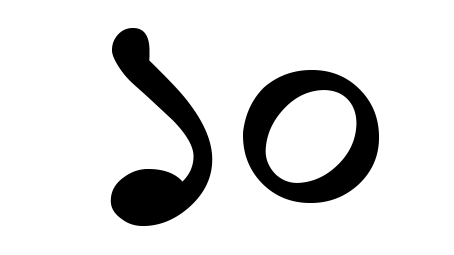
<style>
.page{position:relative;width:454px;height:255px;background:#ffffff}
.page>*{position:absolute;margin:0}
.t1{font:300px "KalpurushANSI";color:#000000}
</style>
<div class="page">
<p class="t1" style="left:110px;top:28px;width:269px;height:198px">10</p>
</div>
